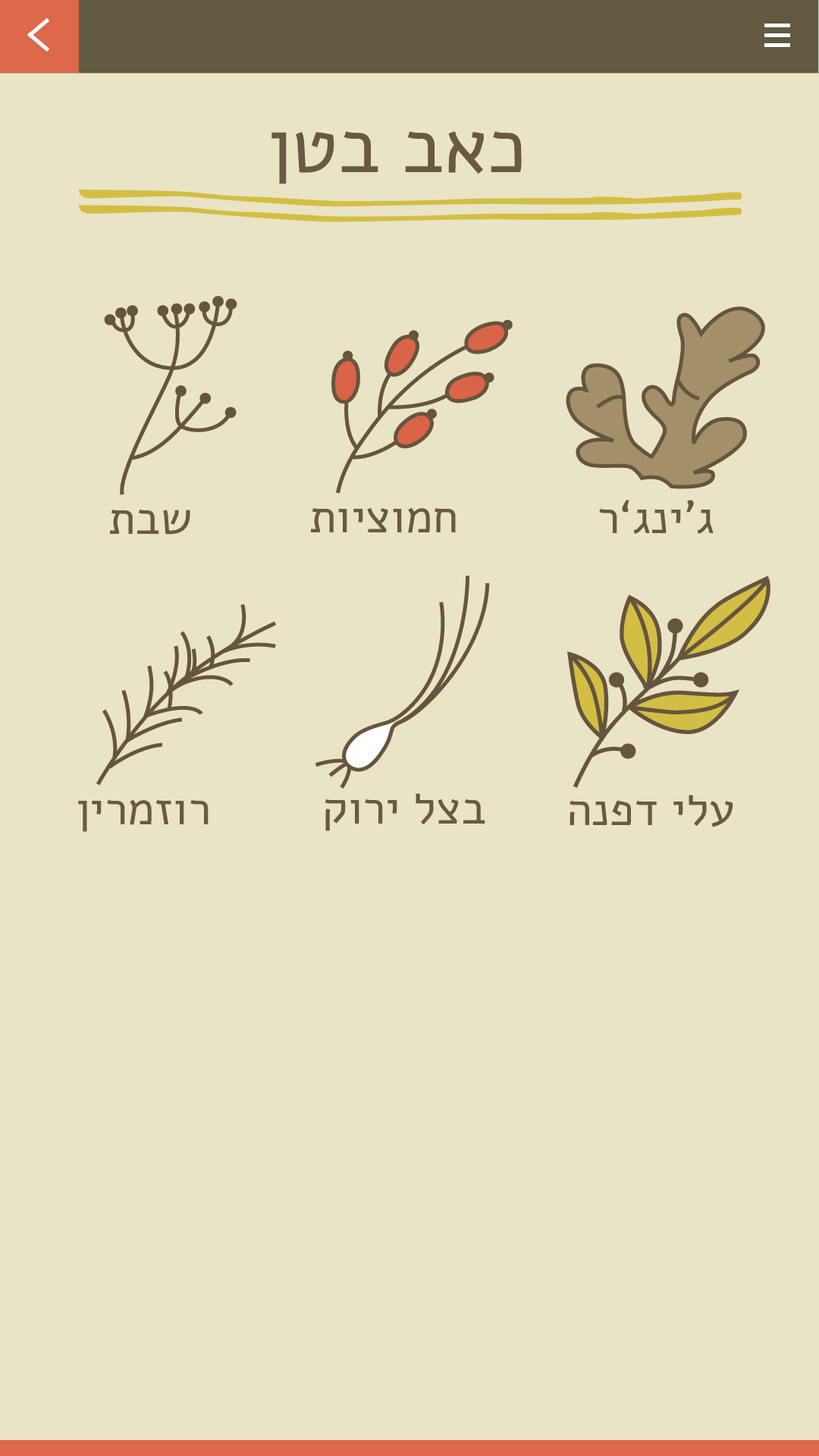
<style>
.page{position:relative;width:819px;height:1456px;background:#e9e4c6}
.page>*{position:absolute;margin:0}
.t1{font:77px "Alef-Regular";color:#6a5942}
.t2{font:46.2px "Alef-Regular";color:#6a5942}
</style>
<div class="page">
<p class="t1" style="left:271px;top:131px;width:251px;height:53px">ןטב באכ</p>
<p class="t2" style="left:110px;top:510px;width:80px;height:25px">תבש</p>
<p class="t2" style="left:311px;top:507px;width:145px;height:26px">תויצומח</p>
<p class="t2" style="left:599px;top:500px;width:115px;height:34px">ר‘גני’ג</p>
<p class="t2" style="left:325px;top:793px;width:160px;height:38px">קורי לצב</p>
<p class="t2" style="left:570px;top:795px;width:163px;height:32px">הנפד ילע</p>
<p class="t2" style="left:78px;top:799px;width:131px;height:33px">ןירמזור</p>
</div>
